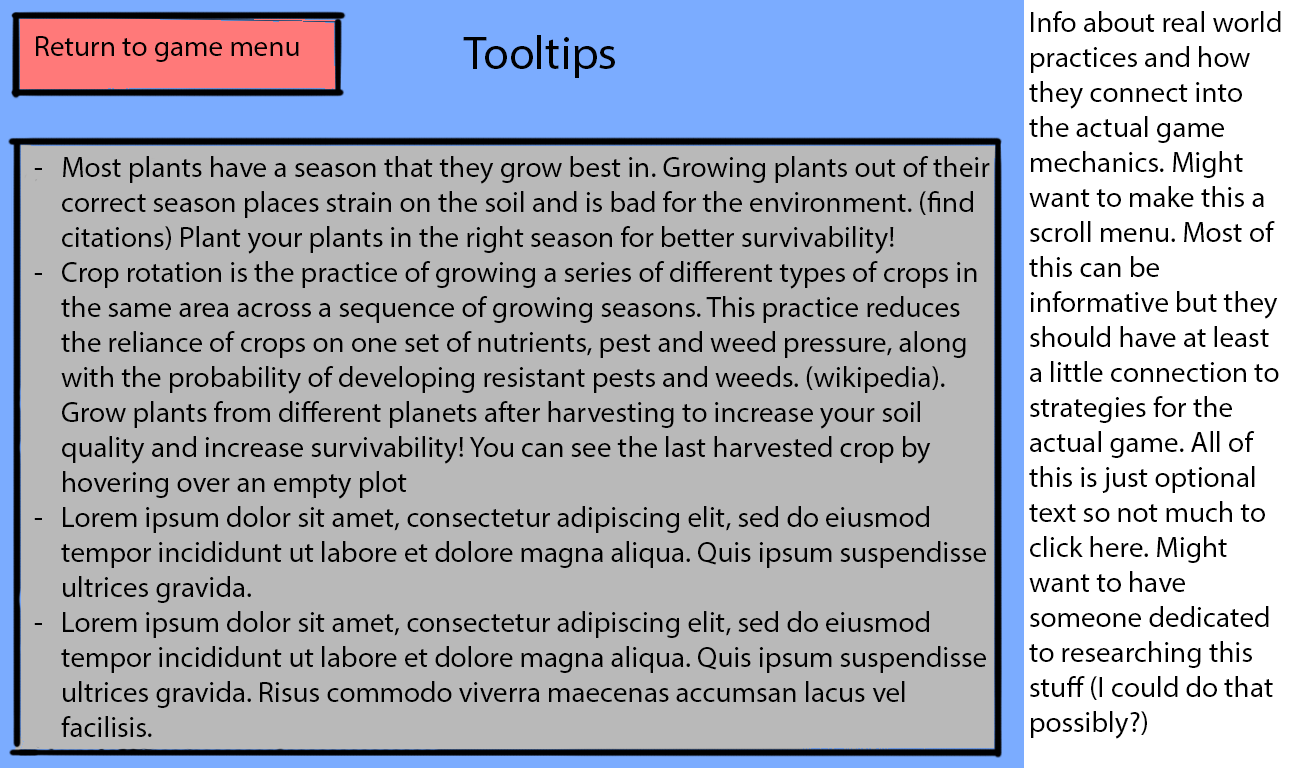
<style>
.page{position:relative;width:1298px;height:768px;background:#b9b9b9}
.page>*{position:absolute;margin:0}
.t1{font:29.2px "MyriadPro-Regular";color:#000000}
.t2{font:46.7px "MyriadPro-Regular";color:#000000}
</style>
<div class="page">
<p class="t1" style="left:1029px;top:11px;width:252px;height:728px">Info about real world practices and how they connect into the actual game mechanics. Might want to make this a scroll menu. Most of this can be informative but they should have at least a little connection to strategies for the actual game. All of this is just optional text so not much to click here. Might want to have someone dedicated to researching this stuff (I could do that possibly?)</p>
<p class="t1" style="left:36px;top:36px;width:263px;height:26px">Return to game menu</p>
<p class="t2" style="left:463px;top:35px;width:152px;height:43px">Tooltips</p>
<p class="t1" style="left:34px;top:156px;width:956px;height:581px">Most plants have a season that they grow best in. Growing plants out of their correct season places strain on the soil and is bad for the environment. (find citations) Plant your plants in the right season for better survivability!<br>Crop rotation is the practice of growing a series of different types of crops in the same area across a sequence of growing seasons. This practice reduces the reliance of crops on one set of nutrients, pest and weed pressure, along with the probability of developing resistant pests and weeds. (wikipedia). Grow plants from different planets after harvesting to increase your soil quality and increase survivability! You can see the last harvested crop by hovering over an empty plot<br>Lorem ipsum dolor sit amet, consectetur adipiscing elit, sed do eiusmod tempor incididunt ut labore et dolore magna aliqua. Quis ipsum suspendisse ultrices gravida.<br>Lorem ipsum dolor sit amet, consectetur adipiscing elit, sed do eiusmod tempor incididunt ut labore et dolore magna aliqua. Quis ipsum suspendisse ultrices gravida. Risus commodo viverra maecenas accumsan lacus vel facilisis.</p>
</div>
